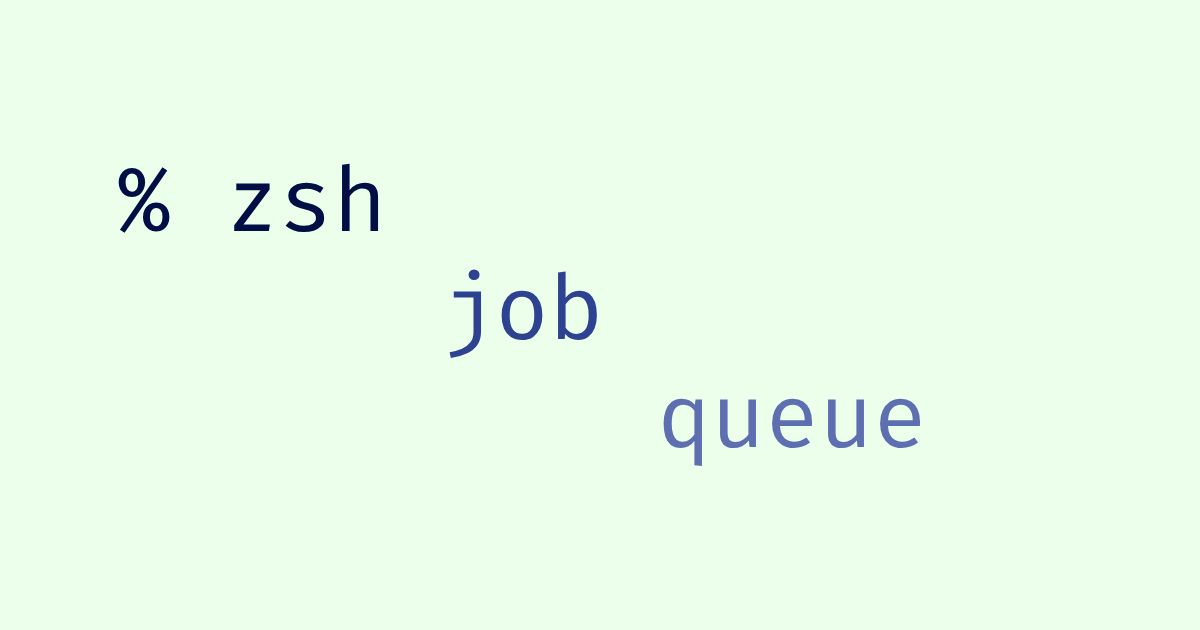
<style>
.page{position:relative;width:1200px;height:630px;background:#ecffeb}
.page>*{position:absolute;margin:0}
.t1{font:90px "FiraCode-Regular";color:#000e46}
.t2{font:90px "FiraCode-Regular";color:#2e4292}
.t3{font:90px "FiraCode-Regular";color:#5e6fb1}
</style>
<div class="page">
<p class="t1" style="left:118px;top:163px;width:803px;height:304px">% zsh<br>      <span class="t2">job<br>          </span><span class="t3">queue</span></p>
</div>
